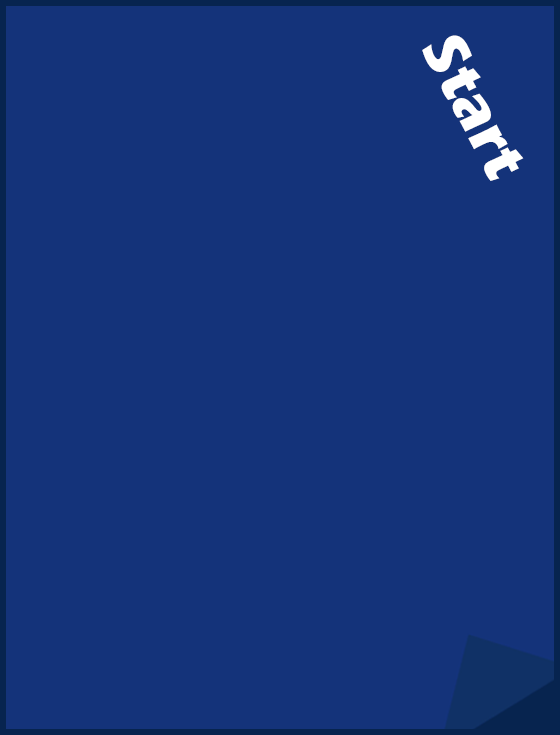
<style>
.page{position:relative;width:560px;height:735px;background:#14337a}
.page>*{position:absolute;margin:0}
.t1{font:62.9px "ErasITC-Bold";color:#ffffff}
</style>
<div class="page">
<p class="t1" style="left:422px;top:35px;width:102px;height:146px;rotate:74deg">Start</p>
</div>
